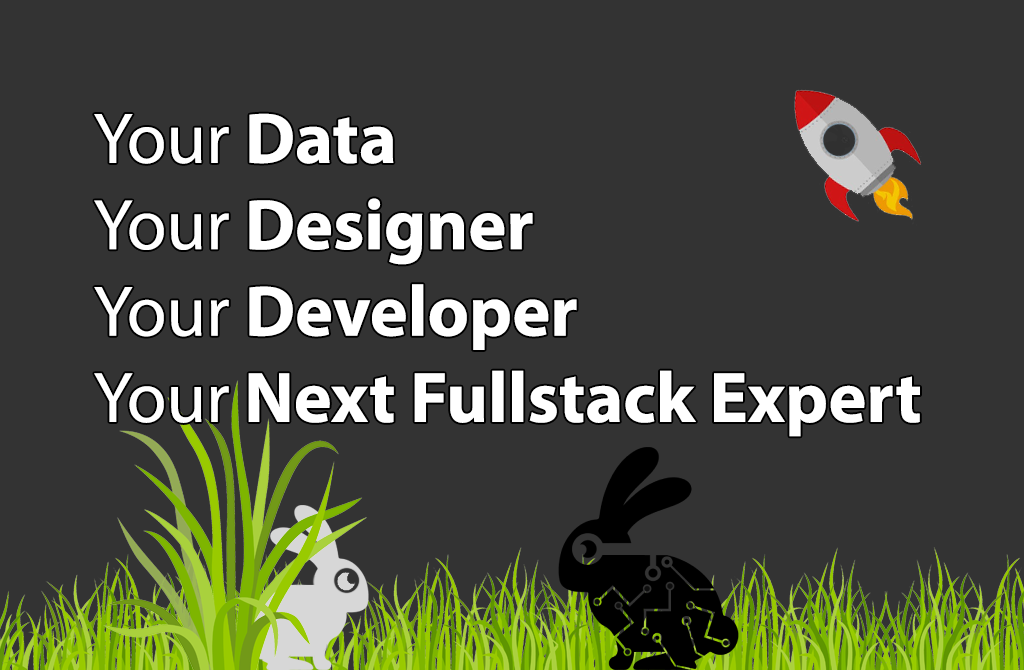
<style>
.page{position:relative;width:1024px;height:670px;background:#333333}
.page>*{position:absolute;margin:0}
.t1{font:72px "MyriadPro-Bold";color:#ffffff}
.t2{font:72px "MyriadPro-Regular";color:#ffffff}
</style>
<div class="page">
<p class="t1" style="left:94px;top:113px;width:826px;height:324px"><span class="t2">Your </span>Data<br><span class="t2">Your </span>Designer<br><span class="t2">Your </span>Developer<br><span class="t2">Your</span> Next Fullstack Expert</p>
</div>
